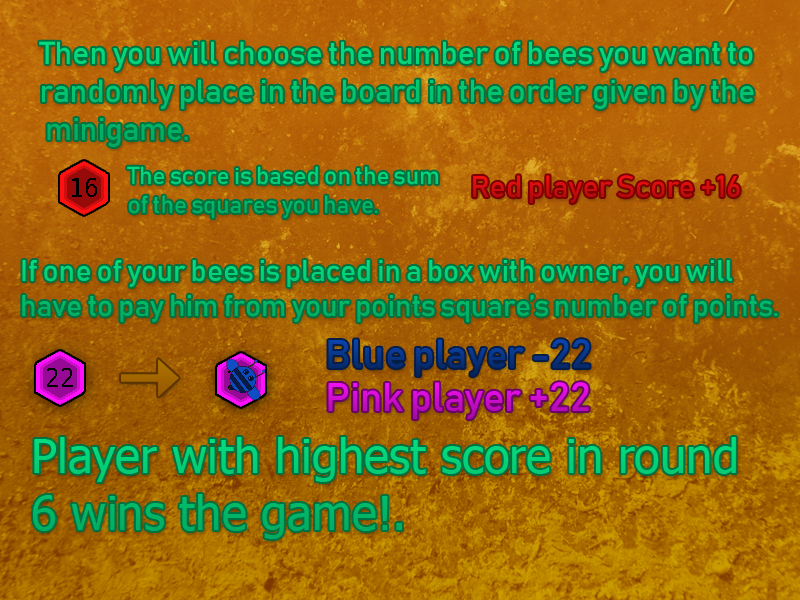
<style>
.page{position:relative;width:800px;height:600px}
.page>*{position:absolute;margin:0}
.t1{font:31.6px "Bahnschrift";color:#04c772}
.t2{font:24.2px "Bahnschrift"}
.t3{font:30.2px "Bahnschrift";color:#ce0e0e}
.t4{font:29.6px "Bahnschrift"}
.t5{font:39.9px "Bahnschrift"}
.t6{font:47.2px "Tahoma"}
</style>
<div class="page">
<p class="t1" style="left:39px;top:41px;width:715px;height:106px">Then you will choose the number of bees you want to <br>randomly place in the board in the order given by the<br> minigame.</p>
<p class="t2" style="left:127px;top:166px;width:311px;height:52px">The score is based on the sum<br>of the squares you have.</p>
<p class="t3" style="left:473px;top:175px;width:267px;height:28px">Red player Score +16</p>
<p class="t4" style="left:22px;top:260px;width:756px;height:62px">If one of your bees is placed in a box with owner, you will <br>have to pay him from your points square’s number of points.</p>
<p class="t5" style="left:328px;top:339px;width:262px;height:37px">Blue player -22</p>
<p class="t5" style="left:328px;top:382px;width:261px;height:37px">Pink player +22</p>
<p class="t6" style="left:33px;top:437px;width:703px;height:102px">Player with highest score in round<br>6 wins the game!.</p>
</div>
